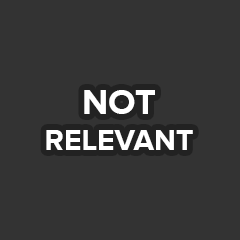
<style>
.page{position:relative;width:240px;height:240px;background:#333333}
.page>*{position:absolute;margin:0}
.t1{font:30px "ProximaNova-Bold";color:#ffffff;text-transform:uppercase}
.t2{font:36px "ProximaNova-Bold";color:#ffffff;text-transform:uppercase}
</style>
<div class="page">
<p class="t1" style="left:46px;top:90px;width:147px;height:60px;text-align:center"><span class="t2">Not<br></span>Relevant</p>
</div>
